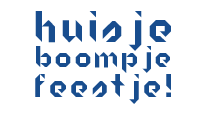
<style>
.page{position:relative;width:206px;height:120px;background:#ffffff}
.page>*{position:absolute;margin:0}
.t1{font:43px "Origram";letter-spacing:0.1em;color:#184d8e}
.t2{font:29px "Origram";letter-spacing:0.1em;color:#184d8e}
.t3{font:32px "Origram";letter-spacing:0.1em;color:#184d8e}
</style>
<div class="page">
<p class="t1" style="left:35px;top:11px;width:136px;height:40px">Huisje</p>
<p class="t2" style="left:36px;top:46px;width:134px;height:27px">boompje</p>
<p class="t3" style="left:35px;top:74px;width:136px;height:30px">Feestje!</p>
</div>
